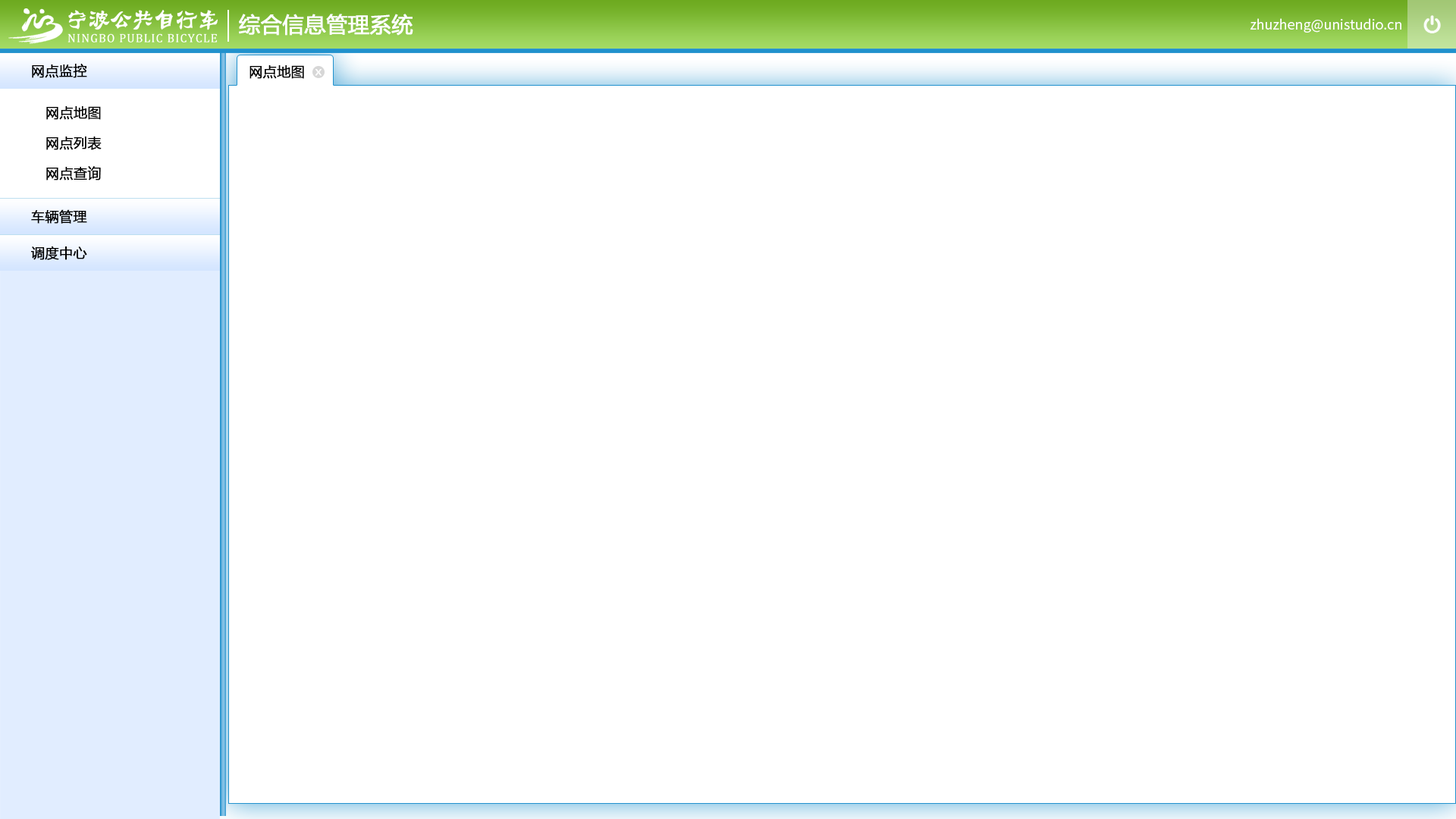
<style>
.page{position:relative;width:1456px;height:819px;background:#ffffff}
.page>*{position:absolute;margin:0}
.t1{font:21.2px "MicrosoftYaHei";color:#ffffff;font-weight:bold}
.t2{font:13.6px "SourceHanSansCN-Normal";color:#ffffff}
.t3{font:13.6px "MicrosoftYaHei";color:#000000;font-weight:bold}
</style>
<div class="page">
<p class="t1" style="left:239px;top:14px;width:174px;height:22px">综合信息管理系统</p>
<p class="t2" style="left:1250px;top:18px;width:151px;height:15px">zhuzheng@unistudio.cn</p>
<p class="t3" style="left:32px;top:64px;width:55px;height:14px">网点监控</p>
<p class="t3" style="left:249px;top:65px;width:55px;height:14px">网点地图</p>
<p class="t3" style="left:46px;top:106px;width:55px;height:14px">网点地图</p>
<p class="t3" style="left:46px;top:136px;width:56px;height:14px">网点列表</p>
<p class="t3" style="left:46px;top:166px;width:55px;height:14px">网点查询</p>
<p class="t3" style="left:31px;top:209px;width:56px;height:15px">车辆管理</p>
<p class="t3" style="left:31px;top:246px;width:56px;height:14px">调度中心</p>
</div>
